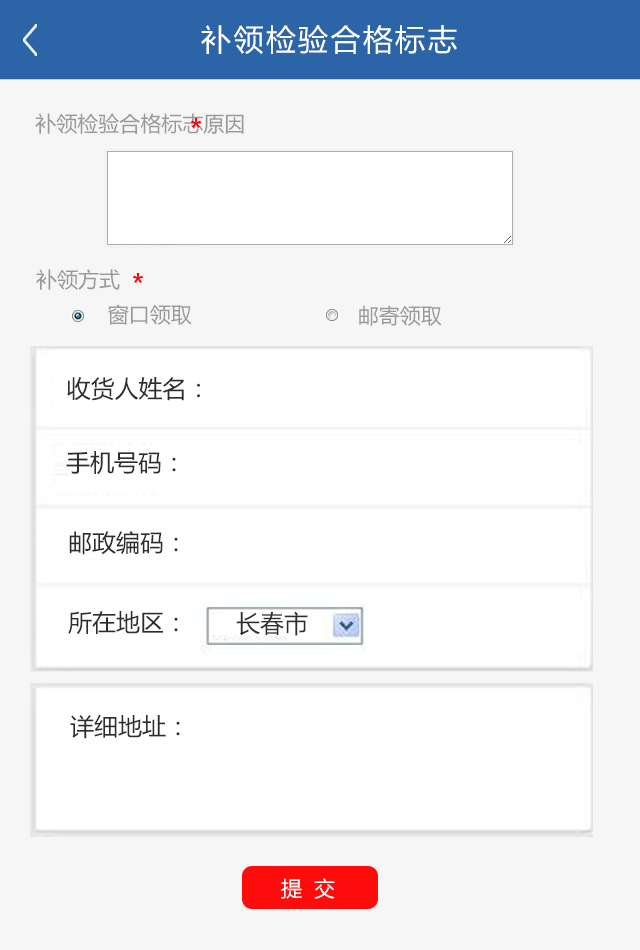
<style>
.page{position:relative;width:640px;height:950px;background:#ffffff}
.page>*{position:absolute;margin:0}
.t1{font:30px "MicrosoftYaHei";letter-spacing:0.08em;color:#ffffff}
.t2{font:21px "MicrosoftYaHei";color:#999999}
.t3{font:24px "MicrosoftYaHei";color:#2e2d2d}
.t4{font:21px "MicrosoftYaHei";letter-spacing:0.14em;color:#ffffff}
</style>
<div class="page">
<p class="t1" style="left:201px;top:25px;width:256px;height:29px">补领检验合格标志</p>
<p class="t2" style="left:35px;top:113px;width:209px;height:21px">补领检验合格标志原因</p>
<p class="t2" style="left:36px;top:269px;width:84px;height:21px">补领方式</p>
<p class="t2" style="left:108px;top:304px;width:84px;height:21px">窗口领取</p>
<p class="t2" style="left:359px;top:305px;width:83px;height:21px">邮寄领取</p>
<p class="t3" style="left:67px;top:377px;width:133px;height:24px">收货人姓名：</p>
<p class="t3" style="left:66px;top:451px;width:110px;height:24px">手机号码：</p>
<p class="t3" style="left:69px;top:531px;width:109px;height:24px">邮政编码：</p>
<p class="t3" style="left:68px;top:611px;width:110px;height:24px">所在地区：</p>
<p class="t3" style="left:236px;top:611px;width:72px;height:25px">长春市</p>
<p class="t3" style="left:70px;top:714px;width:110px;height:25px">详细地址：</p>
<p class="t4" style="left:281px;top:878px;width:54px;height:21px">提 交</p>
</div>
